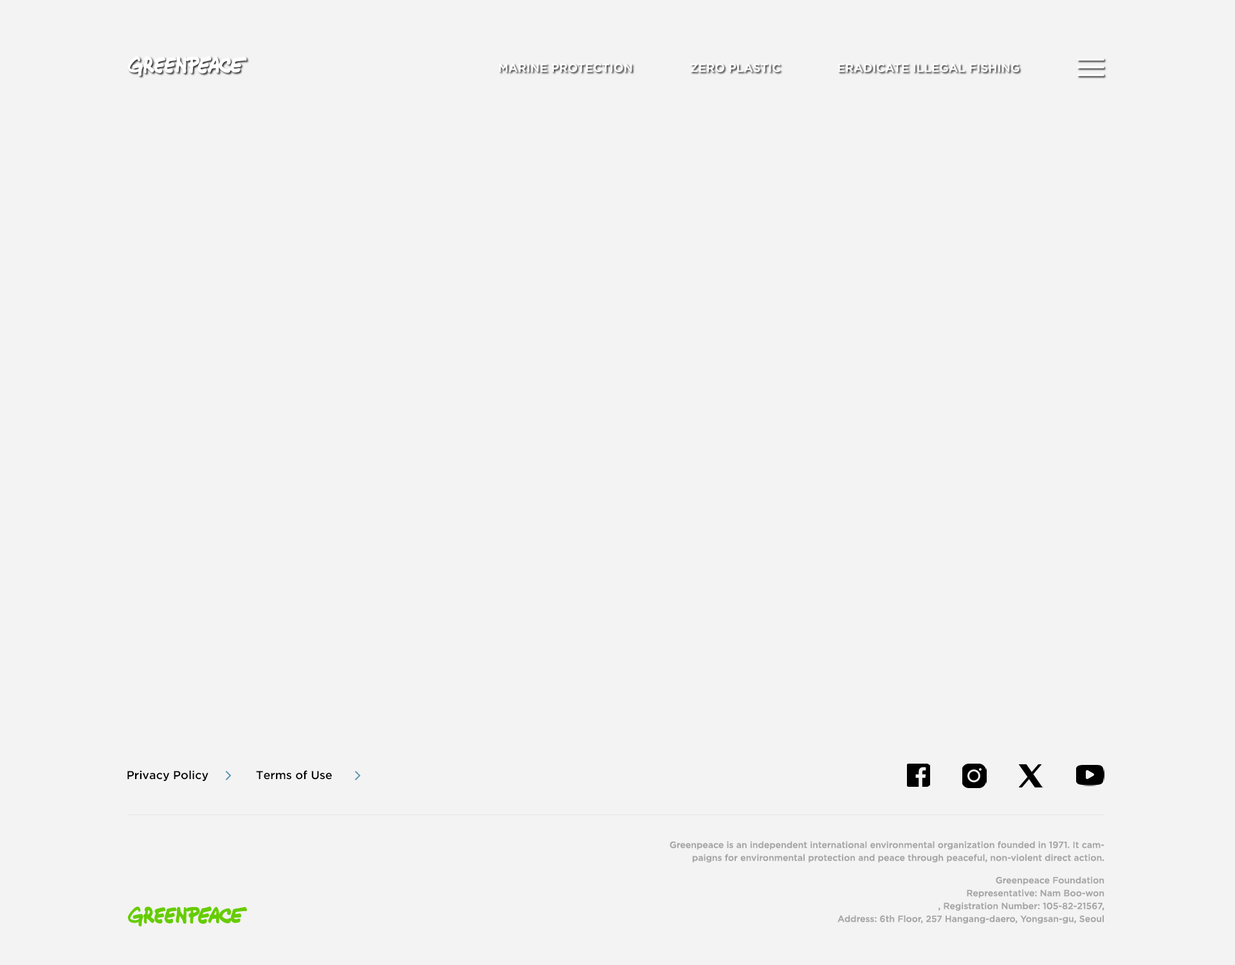
<style>
.page{position:relative;width:1235px;height:965px;background:#f3f3f3}
.page>*{position:absolute;margin:0}
.t1{font:11.6px "GothamPro-Medium";color:#ffffff;text-transform:uppercase}
.t2{font:11.6px "GothamPro-Medium";color:#000000}
.t3{font:9px/12.9px "GothamPro-Medium";color:#a6a6a6}
</style>
<div class="page">
<p class="t1" style="left:499px;top:63px;width:134px;height:9px">Marine protection</p>
<p class="t1" style="left:690px;top:63px;width:91px;height:9px">Zero plastic</p>
<p class="t1" style="left:838px;top:63px;width:182px;height:9px">Eradicate illegal fishing</p>
<p class="t2" style="left:127px;top:770px;width:81px;height:11px">Privacy Policy</p>
<p class="t2" style="left:256px;top:770px;width:76px;height:10px">Terms of Use</p>
<p class="t3" style="left:670px;top:841px;width:435px;height:22px;text-align:right">Greenpeace is an independent international environmental organization founded in 1971. It campaigns for environmental protection and peace through peaceful, non-violent direct action.</p>
<p class="t3" style="left:838px;top:876px;width:267px;height:48px;text-align:right">Greenpeace Foundation<br>Representative: Nam Boo-won<br>, Registration Number: 105-82-21567,<br>Address: 6th Floor, 257 Hangang-daero, Yongsan-gu, Seoul</p>
</div>
